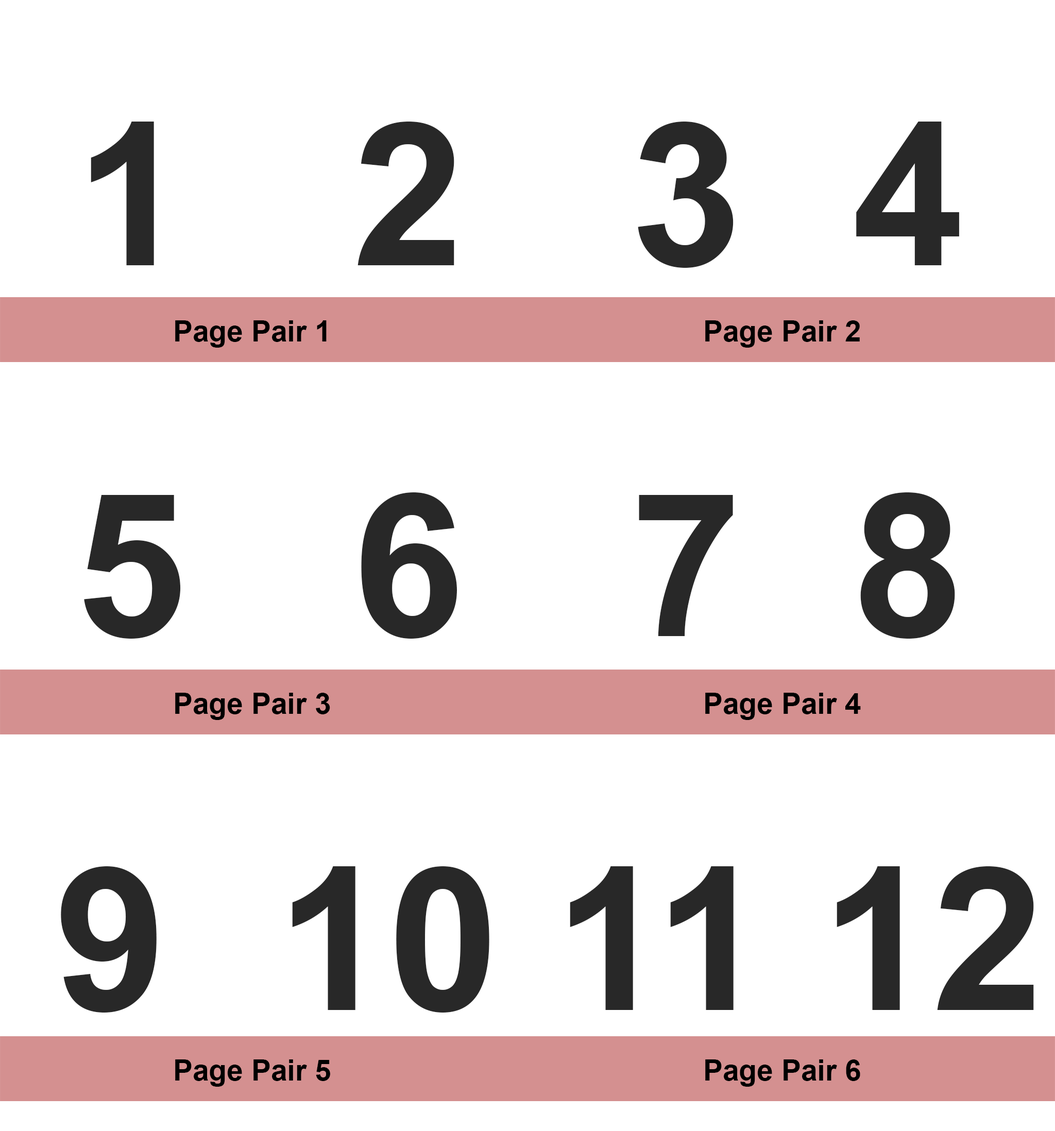
<style>
.page{position:relative;width:1055px;height:1131px;background:#ffffff}
.page>*{position:absolute;margin:0}
.t1{font:199.8px "Arial-BoldMT";color:#282828}
.t2{font:29.3px "Arial-BoldMT";color:#000000}
</style>
<div class="page">
<p class="t1" style="left:91px;top:122px;width:868px;height:146px">1   2   3  4</p>
<p class="t2" style="left:175px;top:320px;width:151px;height:28px">Page Pair 1</p>
<p class="t2" style="left:705px;top:320px;width:154px;height:28px">Page Pair 2</p>
<p class="t1" style="left:84px;top:492px;width:871px;height:146px">5   6   7  8</p>
<p class="t2" style="left:175px;top:693px;width:155px;height:27px">Page Pair 3</p>
<p class="t2" style="left:705px;top:693px;width:155px;height:27px">Page Pair 4</p>
<p class="t1" style="left:61px;top:866px;width:972px;height:146px">9  10 11 12</p>
<p class="t2" style="left:175px;top:1059px;width:155px;height:27px">Page Pair 5</p>
<p class="t2" style="left:705px;top:1059px;width:155px;height:27px">Page Pair 6</p>
</div>
